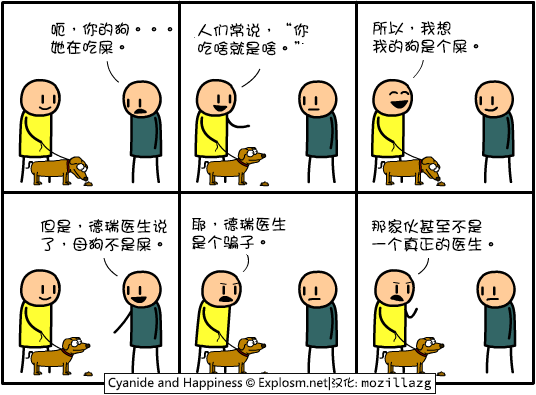
<style>
.page{position:relative;width:536px;height:395px;background:#ffffff}
.page>*{position:absolute;margin:0}
.t1{font:16px/18px "DFGirl";color:#000000}
</style>
<div class="page">
<p class="t1" style="left:51px;top:22px;width:122px;height:33px">呃，你的狗。。。<br>她在吃屎。</p>
<p class="t1" style="left:198px;top:22px;width:111px;height:34px">人们常说，“你<br>吃啥就是啥。”</p>
<p class="t1" style="left:372px;top:21px;width:107px;height:33px">所以，我想<br>我的狗是个屎。</p>
<p class="t1" style="left:40px;top:219px;width:127px;height:33px">但是，德瑞医生说<br>了，母狗不是屎。</p>
<p class="t1" style="left:192px;top:217px;width:94px;height:33px">耶，德瑞医生<br>是个骗子。</p>
<p class="t1" style="left:371px;top:219px;width:123px;height:33px">那家伙甚至不是<br>一个真正的医生。</p>
</div>
